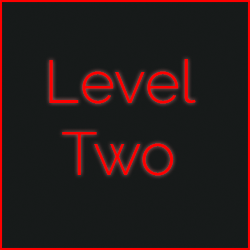
<style>
.page{position:relative;width:250px;height:250px;background:#171a1a}
.page>*{position:absolute;margin:0}
.t1{font:60px "Raleway-Light";color:#ff0000}
</style>
<div class="page">
<p class="t1" style="left:49px;top:59px;width:147px;height:117px;text-align:center">Level <br>Two</p>
</div>
